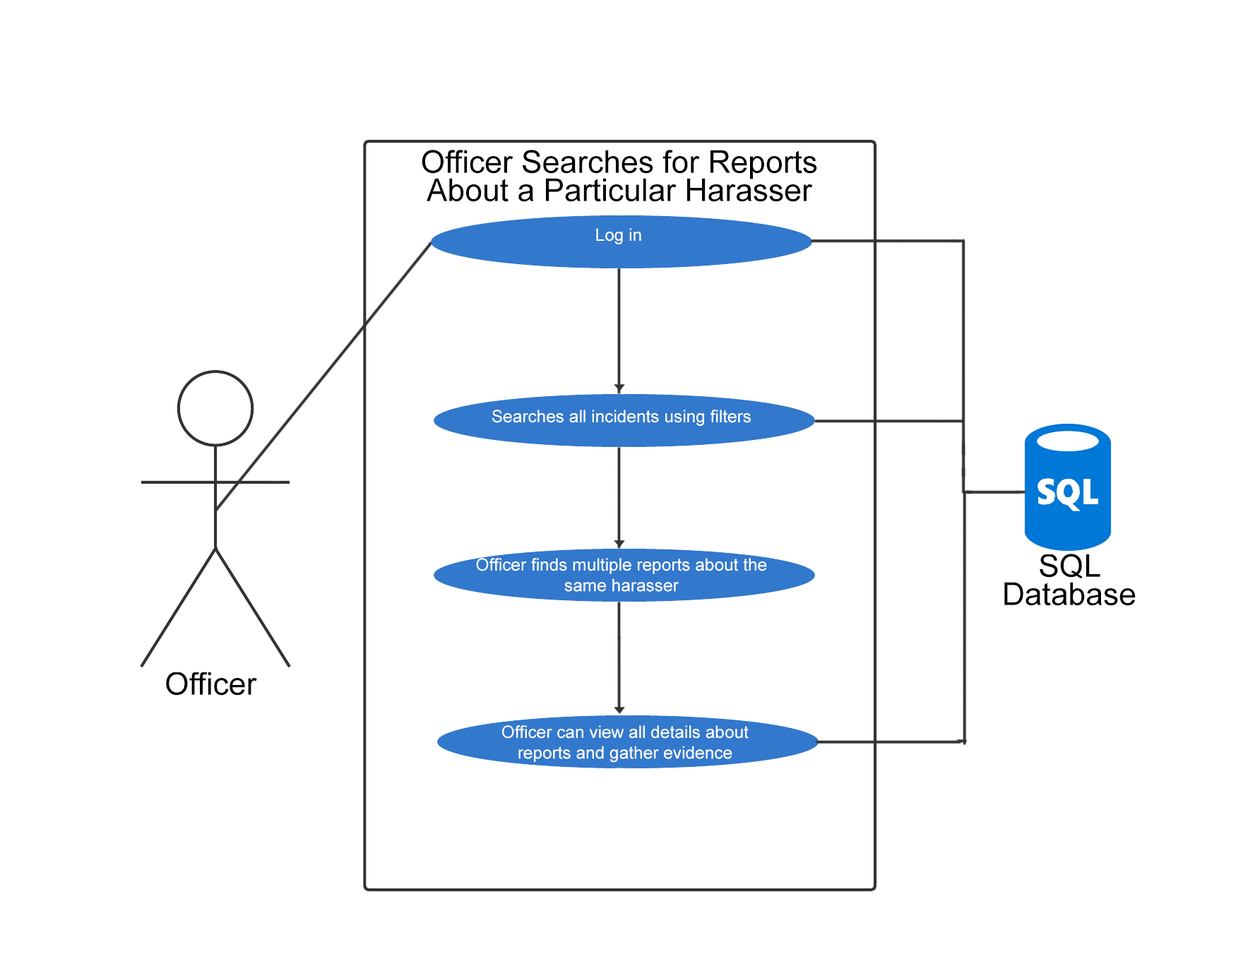
<style>
.page{position:relative;width:1243px;height:959px;background:#ffffff}
.page>*{position:absolute;margin:0}
.t1{font:31.4px/28.3px "ArialMT";color:#000000}
.t2{font:17.3px "ArialMT";color:#ffffff}
.t3{font:31.4px "ArialMT";color:#000000}
</style>
<div class="page">
<p class="t1" style="left:422px;top:150px;width:395px;height:52px;text-align:center">Officer Searches for Reports<br>About a Particular Harasser</p>
<p class="t2" style="left:596px;top:228px;width:45px;height:16px">Log in</p>
<p class="t2" style="left:492px;top:410px;width:259px;height:16px">Searches all incidents using filters</p>
<p class="t1" style="left:1004px;top:554px;width:132px;height:52px;text-align:center">SQL<br>Database</p>
<p class="t2" style="left:476px;top:558px;width:291px;height:34px;text-align:center">Officer finds multiple reports about the<br>same harasser</p>
<p class="t3" style="left:166px;top:672px;width:91px;height:24px">Officer</p>
<p class="t2" style="left:502px;top:725px;width:247px;height:38px;text-align:center">Officer can view all details about <br>reports and gather evidence</p>
</div>
